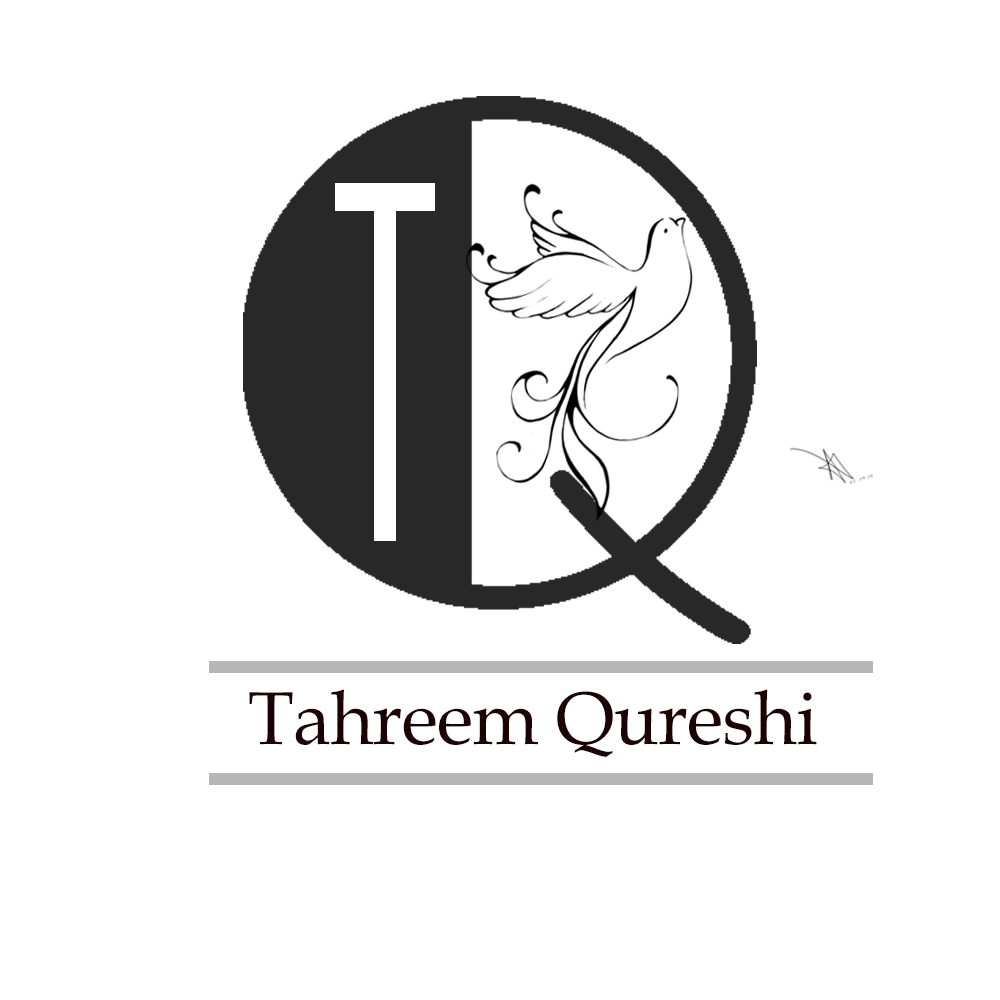
<style>
.page{position:relative;width:1000px;height:1000px;background:#ffffff}
.page>*{position:absolute;margin:0}
.t1{font:468.3px "AgencyFB-Reg";letter-spacing:-0.01em;color:#ffffff;scale:0.71 1}
.t2{font:75px "BookAntiqua";letter-spacing:-0.01em;color:#1b0303}
</style>
<div class="page">
<p class="t1" style="left:335px;top:183px;width:100px;height:358px">T</p>
<p class="t2" style="left:249px;top:689px;width:568px;height:68px">Tahreem Qureshi</p>
</div>
